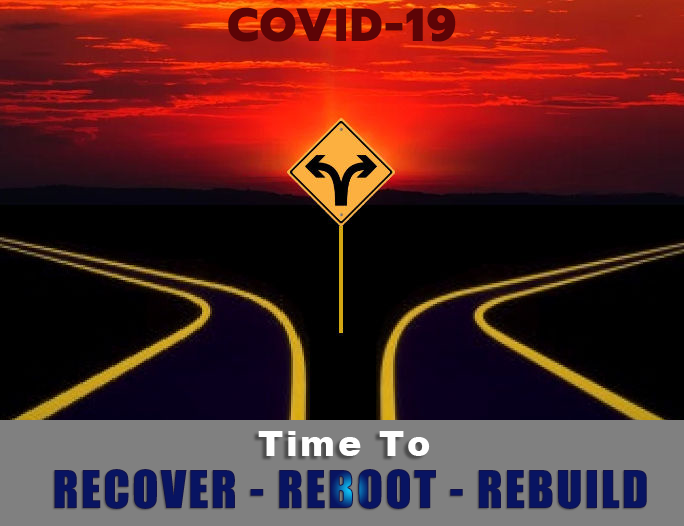
<style>
.page{position:relative;width:684px;height:526px}
.page>*{position:absolute;margin:0}
.t1{font:46.1px "Prompt-ExtraBold";letter-spacing:0.05em;color:#5d0406}
.t2{font:35px "Arial-Black";letter-spacing:0.08em;color:#fefefe}
.t3{font:48px "Impact";letter-spacing:0.05em;color:#0b1075}
</style>
<div class="page">
<p class="t1" style="left:228px;top:7px;width:228px;height:35px">COVID-19</p>
<p class="t2" style="left:258px;top:431px;width:172px;height:25px">Time To</p>
<p class="t3" style="left:54px;top:469px;width:593px;height:40px">RECOVER - REBOOT - REBUILD</p>
</div>
